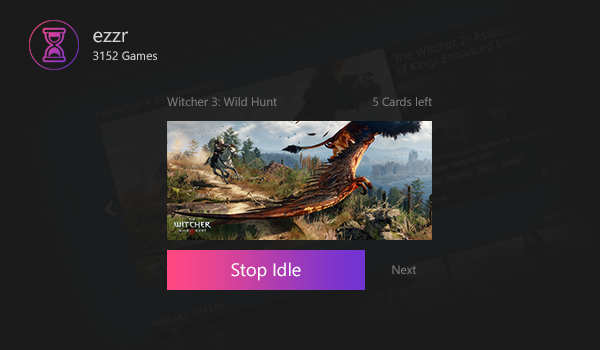
<style>
.page{position:relative;width:600px;height:350px;background:#1b1b1b}
.page>*{position:absolute;margin:0}
.t1{font:12px/18px "SegoeUI";color:#d4d4d4}
.t2{font:20px/18px "SegoeUI";color:#d4d4d4}
.t3{font:12px "SegoeUI";color:#7d7d7d}
.t4{font:18px "SegoeUI";color:#ffffff}
</style>
<div class="page">
<p class="t1" style="left:93px;top:31px;width:64px;height:29px"><span class="t2">ezzr<br></span>3152 Games</p>
<p class="t3" style="left:167px;top:97px;width:110px;height:9px">Witcher 3: Wild Hunt</p>
<p class="t3" style="left:373px;top:97px;width:59px;height:9px">5 Cards left</p>
<p class="t4" style="left:231px;top:262px;width:70px;height:19px">Stop Idle</p>
<p class="t3" style="left:392px;top:265px;width:24px;height:9px">Next</p>
</div>
